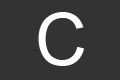
<style>
.page{position:relative;width:120px;height:80px;background:#333333}
.page>*{position:absolute;margin:0}
.t1{font:72px "ArialMT";color:#ffffff}
</style>
<div class="page">
<p class="t1" style="left:38px;top:12px;width:47px;height:54px">C</p>
</div>
